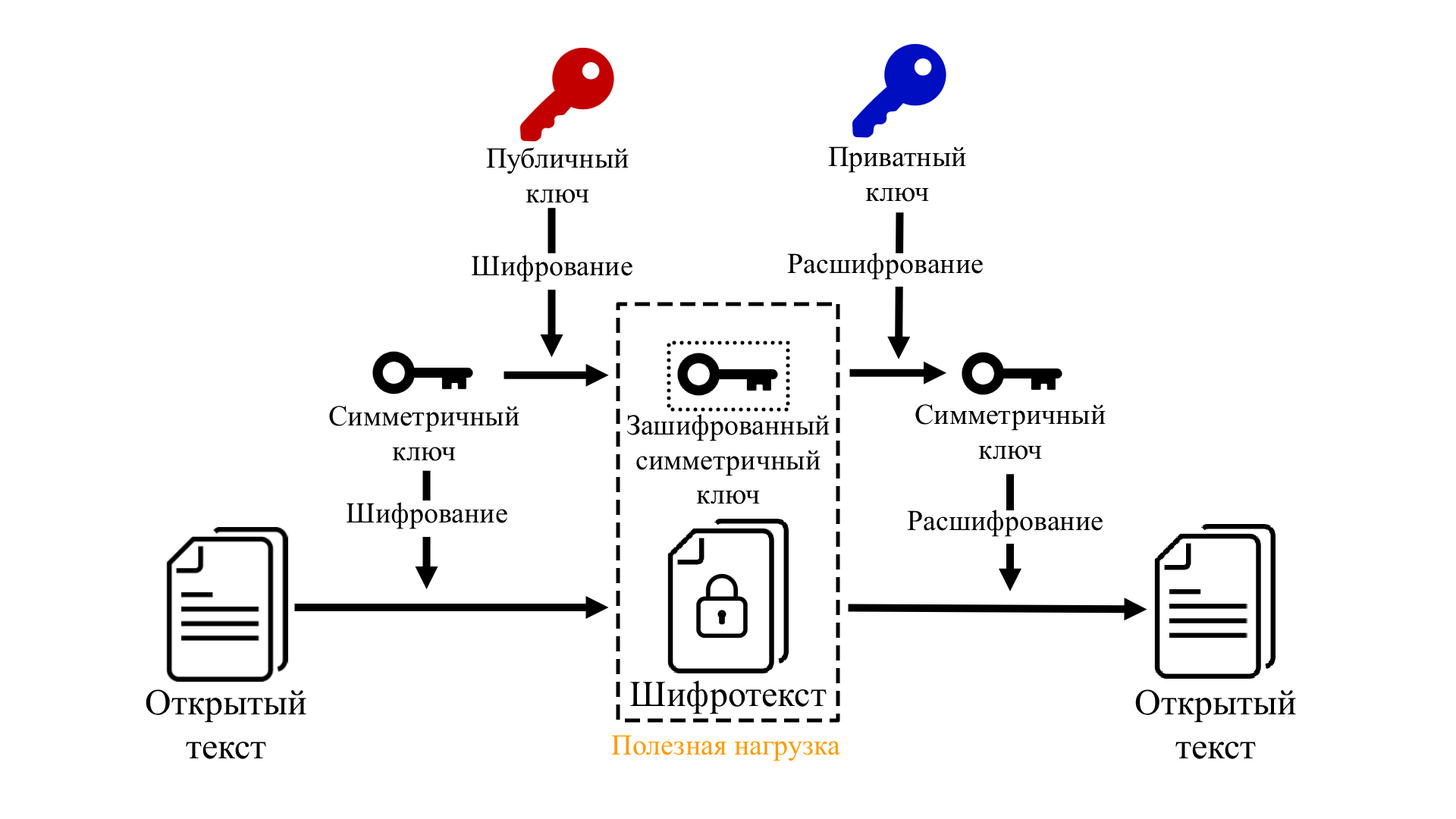
<style>
.page{position:relative;width:1456px;height:819px;background:#ffffff}
.page>*{position:absolute;margin:0}
.t1{font:28.8px "TimesNewRomanPSMT";color:#000000}
.t2{font:36.4px "TimesNewRomanPSMT";color:#000000}
.t3{font:28.8px "TimesNewRomanPSMT";color:#ff9a00}
</style>
<div class="page">
<p class="t1" style="left:486px;top:147px;width:143px;height:56px;text-align:center">Публичный<br>ключ</p>
<p class="t1" style="left:828px;top:146px;width:138px;height:56px;text-align:center">Приватный<br>ключ</p>
<p class="t1" style="left:472px;top:255px;width:160px;height:27px">Шифрование</p>
<p class="t1" style="left:787px;top:253px;width:196px;height:27px">Расшифрование</p>
<p class="t1" style="left:329px;top:406px;width:190px;height:55px;text-align:center">Симметричный<br>ключ</p>
<p class="t1" style="left:915px;top:404px;width:191px;height:56px;text-align:center">Симметричный<br>ключ</p>
<p class="t1" style="left:626px;top:414px;width:204px;height:90px;text-align:center">Зашифрованный<br>симметричный<br>ключ</p>
<p class="t1" style="left:347px;top:502px;width:160px;height:27px">Шифрование</p>
<p class="t1" style="left:907px;top:510px;width:196px;height:27px">Расшифрование</p>
<p class="t2" style="left:146px;top:689px;width:160px;height:70px;text-align:center">Открытый<br>текст</p>
<p class="t2" style="left:630px;top:680px;width:197px;height:34px">Шифротекст</p>
<p class="t2" style="left:1135px;top:689px;width:161px;height:70px;text-align:center">Открытый<br>текст</p>
<p class="t3" style="left:611px;top:735px;width:229px;height:26px">Полезная нагрузка</p>
</div>
